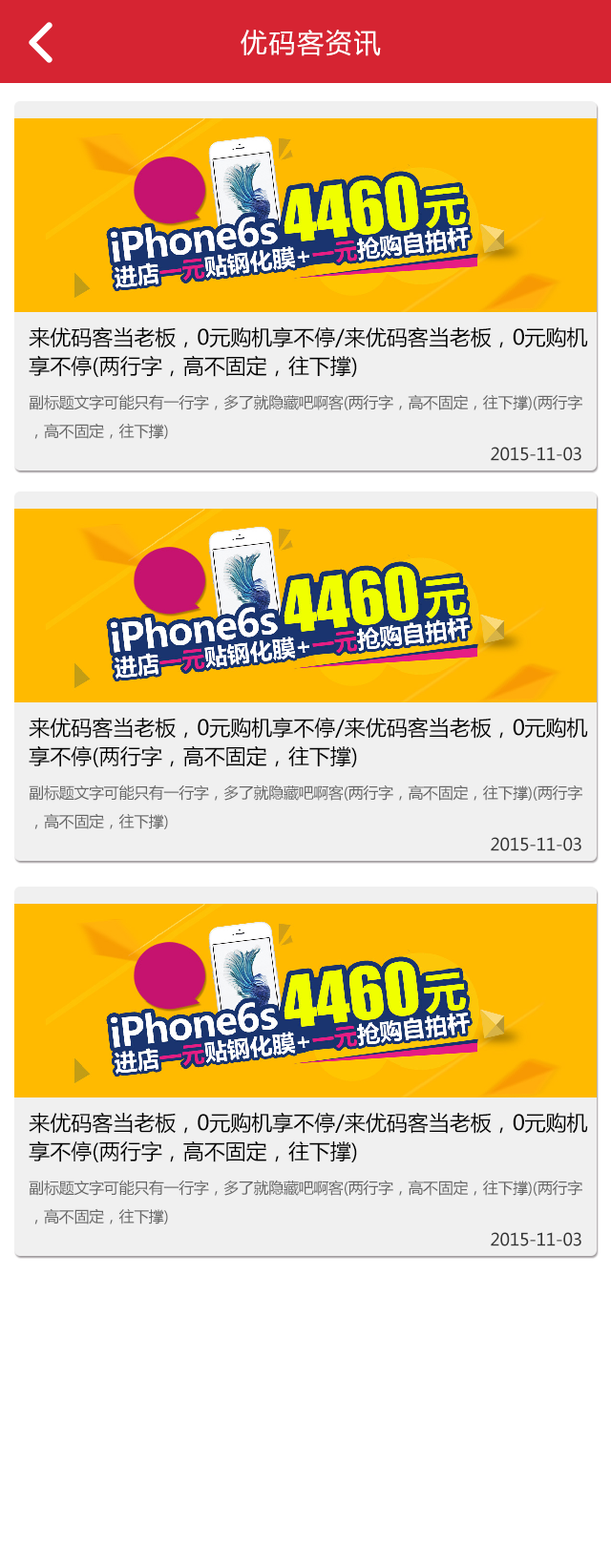
<style>
.page{position:relative;width:611px;height:1568px;background:#ffffff}
.page>*{position:absolute;margin:0}
.t1{font:26.7px "MicrosoftYaHei";letter-spacing:0.06em;color:#ffffff}
.t2{font:21px/28.6px "MicrosoftYaHei";color:#000000}
.t3{font:15.3px/28.6px "MicrosoftYaHei";letter-spacing:-0.02em;color:#666666}
.t4{font:17.2px "MicrosoftYaHei";letter-spacing:-0.02em;color:#353535}
</style>
<div class="page">
<p class="t1" style="left:240px;top:30px;width:141px;height:26px">优码客资讯</p>
<p class="t2" style="left:29px;top:326px;width:559px;height:51px">来优码客当老板，0元购机享不停/来优码客当老板，0元购机<br>享不停(两行字，高不固定，往下撑)</p>
<p class="t3" style="left:29px;top:394px;width:553px;height:45px">副标题文字可能只有一行字，多了就隐藏吧啊客(两行字，高不固定，往下撑)(两行字<br>，高不固定，往下撑)</p>
<p class="t4" style="left:491px;top:447px;width:90px;height:14px">2015-11-03</p>
<p class="t2" style="left:29px;top:717px;width:559px;height:50px">来优码客当老板，0元购机享不停/来优码客当老板，0元购机<br>享不停(两行字，高不固定，往下撑)</p>
<p class="t3" style="left:29px;top:784px;width:553px;height:45px">副标题文字可能只有一行字，多了就隐藏吧啊客(两行字，高不固定，往下撑)(两行字<br>，高不固定，往下撑)</p>
<p class="t4" style="left:491px;top:837px;width:90px;height:14px">2015-11-03</p>
<p class="t2" style="left:29px;top:1112px;width:559px;height:50px">来优码客当老板，0元购机享不停/来优码客当老板，0元购机<br>享不停(两行字，高不固定，往下撑)</p>
<p class="t3" style="left:29px;top:1180px;width:553px;height:44px">副标题文字可能只有一行字，多了就隐藏吧啊客(两行字，高不固定，往下撑)(两行字<br>，高不固定，往下撑)</p>
<p class="t4" style="left:491px;top:1232px;width:90px;height:14px">2015-11-03</p>
</div>
